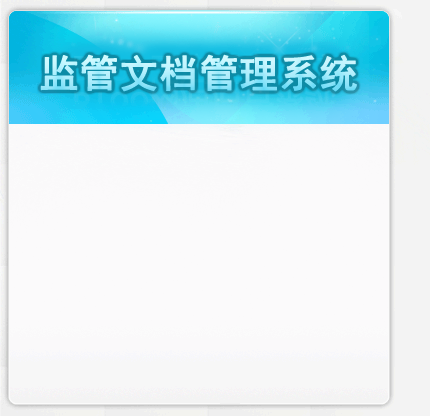
<style>
.page{position:relative;width:430px;height:416px;background:#fbfafb}
.page>*{position:absolute;margin:0}
.t1{font:38px "SimHei";letter-spacing:0.025em;font-weight:bold}
</style>
<div class="page">
<p class="t1" style="left:40px;top:54px;width:317px;height:38px">监管文档管理系统</p>
</div>
